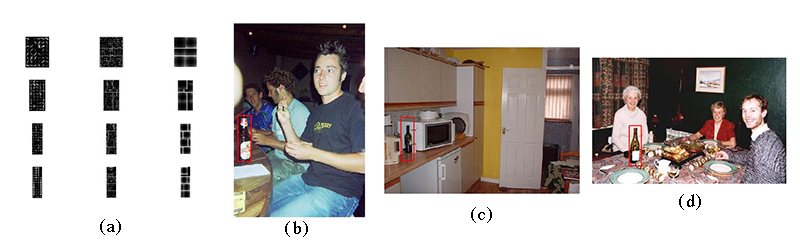
<style>
.page{position:relative;width:800px;height:250px;background:#ffffff}
.page>*{position:absolute;margin:0}
.t1{font:18px "Times-Roman";letter-spacing:0.06em;color:#000000}
</style>
<div class="page">
<p class="t1" style="left:679px;top:194px;width:22px;height:16px">(d)</p>
<p class="t1" style="left:471px;top:207px;width:21px;height:16px">(c)</p>
<p class="t1" style="left:100px;top:219px;width:21px;height:16px">(a)</p>
<p class="t1" style="left:285px;top:221px;width:23px;height:16px">(b)</p>
</div>
